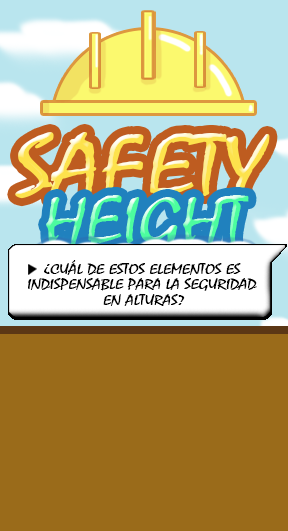
<style>
.page{position:relative;width:288px;height:531px;background:#9a6b1a}
.page>*{position:absolute;margin:0}
.t1{font:89px "Mistral";text-transform:uppercase;scale:1.23 1}
.t2{font:15.2px/15.5px "Mistral";color:#000000;text-transform:uppercase;scale:1.23 1}
</style>
<div class="page">
<p class="t1" style="left:15px;top:132px;width:255px;height:69px">safety</p>
<p class="t2" style="left:28px;top:260px;width:229px;height:46px;text-align:center">¿cuál de estos elementos es <br>indispensable para la seguridad <br>en alturas?</p>
</div>
